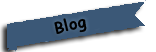
<style>
.page{position:relative;width:156px;height:52px;background:#ffffff}
.page>*{position:absolute;margin:0}
.t1{font:15.5px "ComicSansMS";color:#000000;font-weight:bold}
</style>
<div class="page">
<p class="t1" style="left:54px;top:18px;width:33px;height:16px;rotate:-13deg">Blog</p>
</div>
